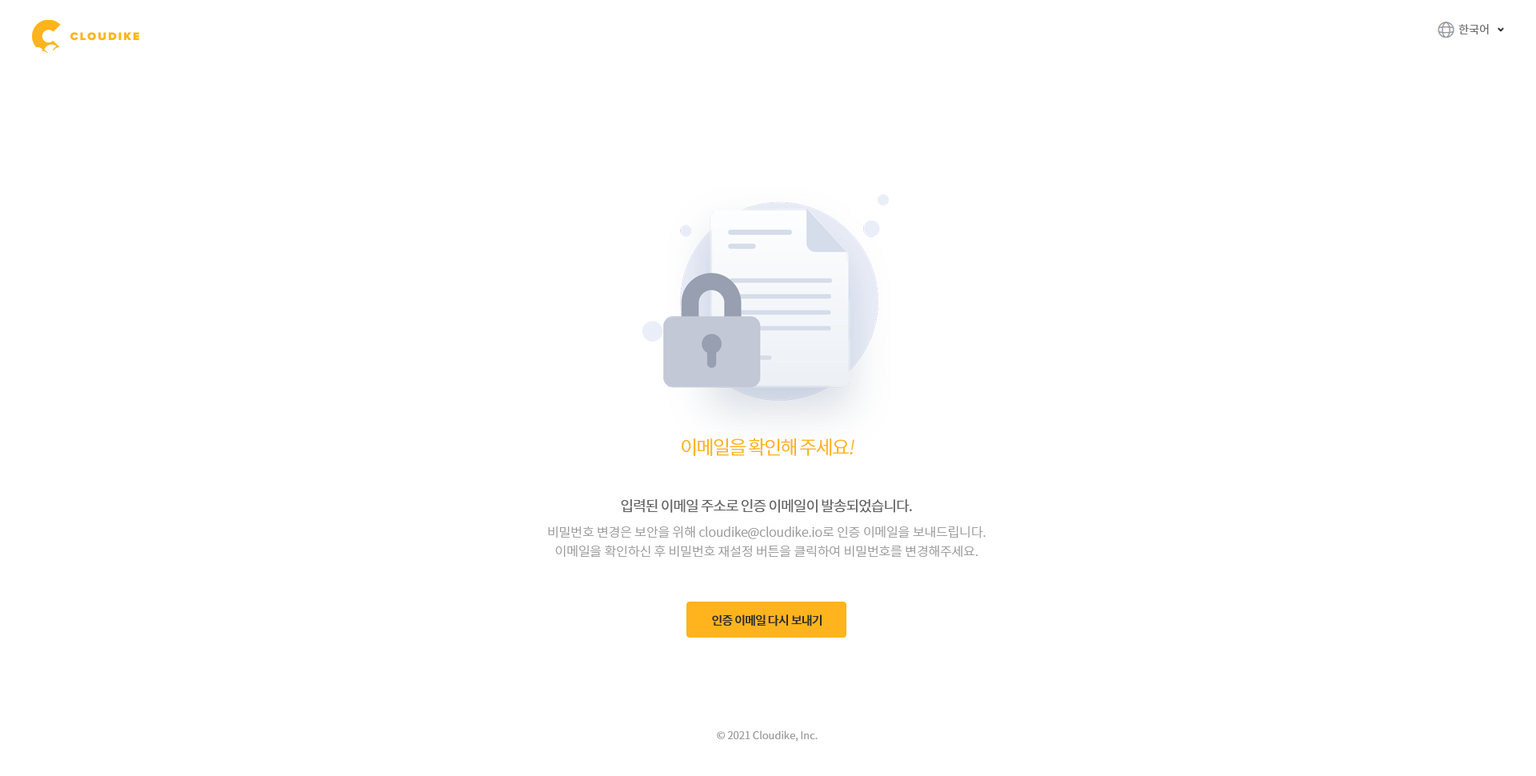
<style>
.page{position:relative;width:1536px;height:776px;background:#ffffff}
.page>*{position:absolute;margin:0}
.t1{font:11.2px "NotoSansCJKkr-DemiLight";color:#666666}
.t2{font:19.2px "NotoSansCJKkr-DemiLight";letter-spacing:-0.075em;color:#ffb41d}
.t3{font:19.2px "NotoSansCJKkr-DemiLight";letter-spacing:-0.075em;color:#ffb41d;font-style:italic}
.t4{font:14.4px "NotoSansCJKkr-Regular";letter-spacing:-0.05em;color:#666666}
.t5{font:12.8px/19.2px "NotoSansCJKkr-Light";letter-spacing:-0.005em;color:#999999}
.t6{font:12px "NotoSansCJKkr-Medium";letter-spacing:-0.05em;color:#2d2d2d}
.t7{font:10.4px "NotoSansCJKkr-DemiLight";color:#999999}
</style>
<div class="page">
<p class="t1" style="left:1459px;top:24px;width:30px;height:11px">한국어</p>
<p class="t2" style="left:682px;top:438px;width:173px;height:18px">이메일을 확인해 주세요<span class="t3">!</span></p>
<p class="t4" style="left:621px;top:499px;width:291px;height:14px">입력된 이메일 주소로 인증 이메일이 발송되었습니다.</p>
<p class="t5" style="left:548px;top:526px;width:438px;height:32px;text-align:center">비밀번호 변경은 보안을 위해 cloudike@cloudike.io로 인증 이메일을 보내드립니다.<br>이메일을 확인하신 후 비밀번호 재설정 버튼을 클릭하여 비밀번호를 변경해주세요.</p>
<p class="t6" style="left:712px;top:615px;width:110px;height:12px">인증 이메일 다시 보내기</p>
<p class="t7" style="left:717px;top:731px;width:101px;height:11px">© 2021 Cloudike, Inc.</p>
</div>
